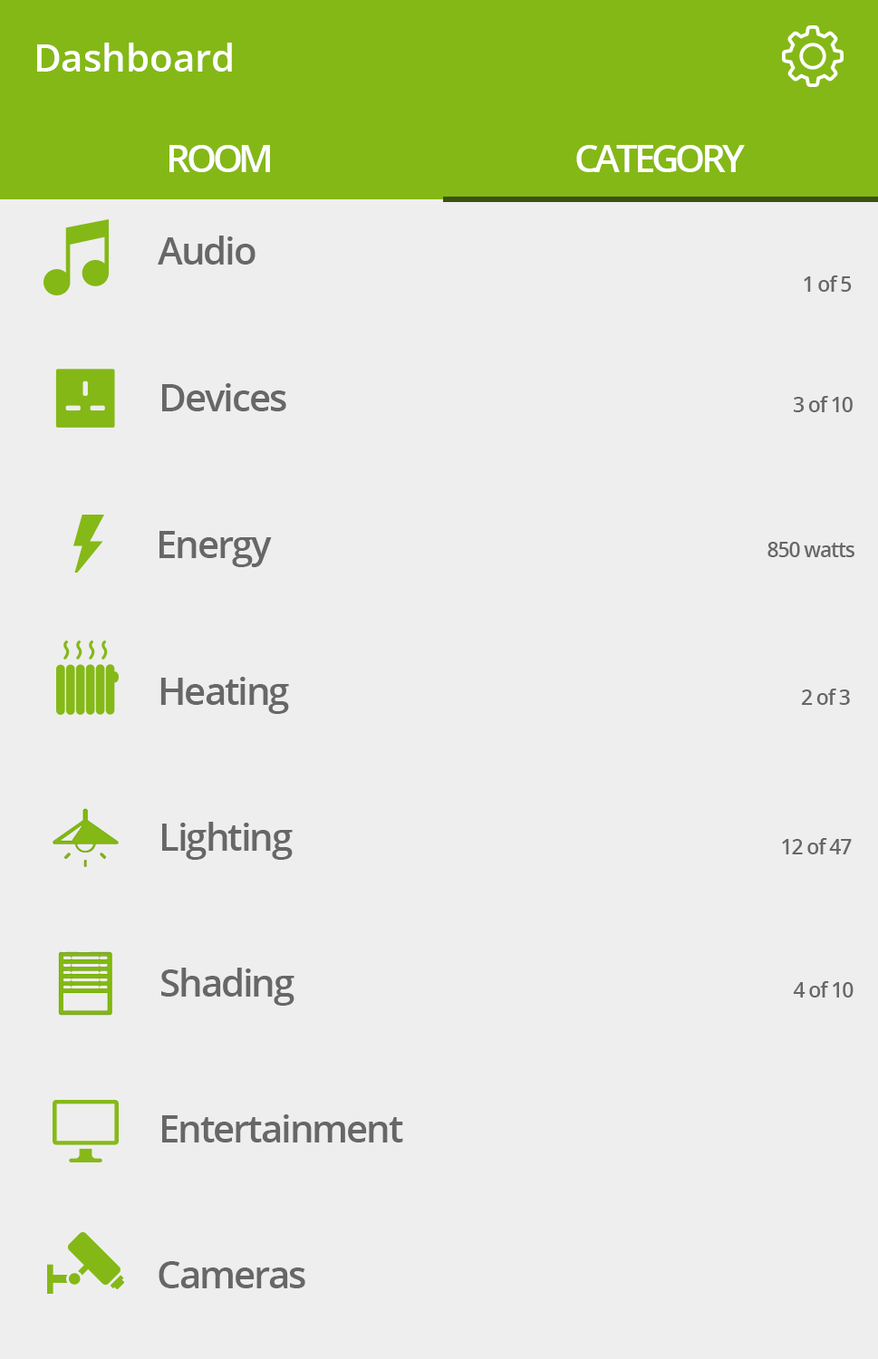
<style>
.page{position:relative;width:878px;height:1359px;background:#eeeeee}
.page>*{position:absolute;margin:0}
.t1{font:38px "OpenSans-Semibold";color:#ffffff}
.t2{font:38px "OpenSans-Semibold";letter-spacing:-0.1em;color:#ffffff}
.t3{font:38px "OpenSans-Semibold";letter-spacing:-0.05em;color:#676767}
.t4{font:20.8px "OpenSans-Semibold";letter-spacing:-0.05em;color:#676767}
</style>
<div class="page">
<p class="t1" style="left:37px;top:43px;width:195px;height:29px">Dashboard</p>
<p class="t2" style="left:169px;top:145px;width:101px;height:27px">ROOM</p>
<p class="t2" style="left:576px;top:145px;width:169px;height:27px">CATEGORY</p>
<p class="t3" style="left:158px;top:235px;width:97px;height:29px">Audio</p>
<p class="t4" style="left:803px;top:275px;width:48px;height:17px">1 of 5</p>
<p class="t3" style="left:162px;top:383px;width:124px;height:28px">Devices</p>
<p class="t4" style="left:793px;top:396px;width:59px;height:16px">3 of 10</p>
<p class="t3" style="left:159px;top:531px;width:113px;height:36px">Energy</p>
<p class="t4" style="left:767px;top:542px;width:87px;height:15px">850 watts</p>
<p class="t3" style="left:160px;top:677px;width:129px;height:37px">Heating</p>
<p class="t4" style="left:802px;top:688px;width:48px;height:17px">2 of 3</p>
<p class="t3" style="left:162px;top:822px;width:131px;height:38px">Lighting</p>
<p class="t4" style="left:782px;top:838px;width:69px;height:16px">12 of 47</p>
<p class="t3" style="left:161px;top:967px;width:133px;height:38px">Shading</p>
<p class="t4" style="left:793px;top:981px;width:60px;height:16px">4 of 10</p>
<p class="t3" style="left:162px;top:1114px;width:241px;height:28px">Entertainment</p>
<p class="t3" style="left:159px;top:1261px;width:146px;height:27px">Cameras</p>
</div>
